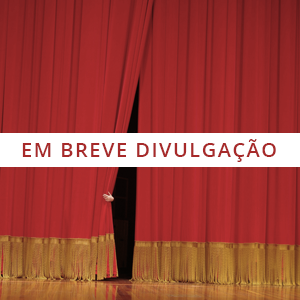
<style>
.page{position:relative;width:300px;height:300px}
.page>*{position:absolute;margin:0}
.t1{font:20px "OpenSans-Semibold";letter-spacing:0.075em;color:#a72a2a;text-transform:uppercase}
</style>
<div class="page">
<p class="t1" style="left:22px;top:139px;width:254px;height:23px">Em breve divulgação</p>
</div>
